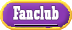
<style>
.page{position:relative;width:72px;height:30px}
.page>*{position:absolute;margin:0}
.t1{font:18px "Rockwell-Condensed";color:#ffffff;font-weight:bold}
</style>
<div class="page">
<p class="t1" style="left:13px;top:6px;width:46px;height:14px">Fanclub</p>
</div>
